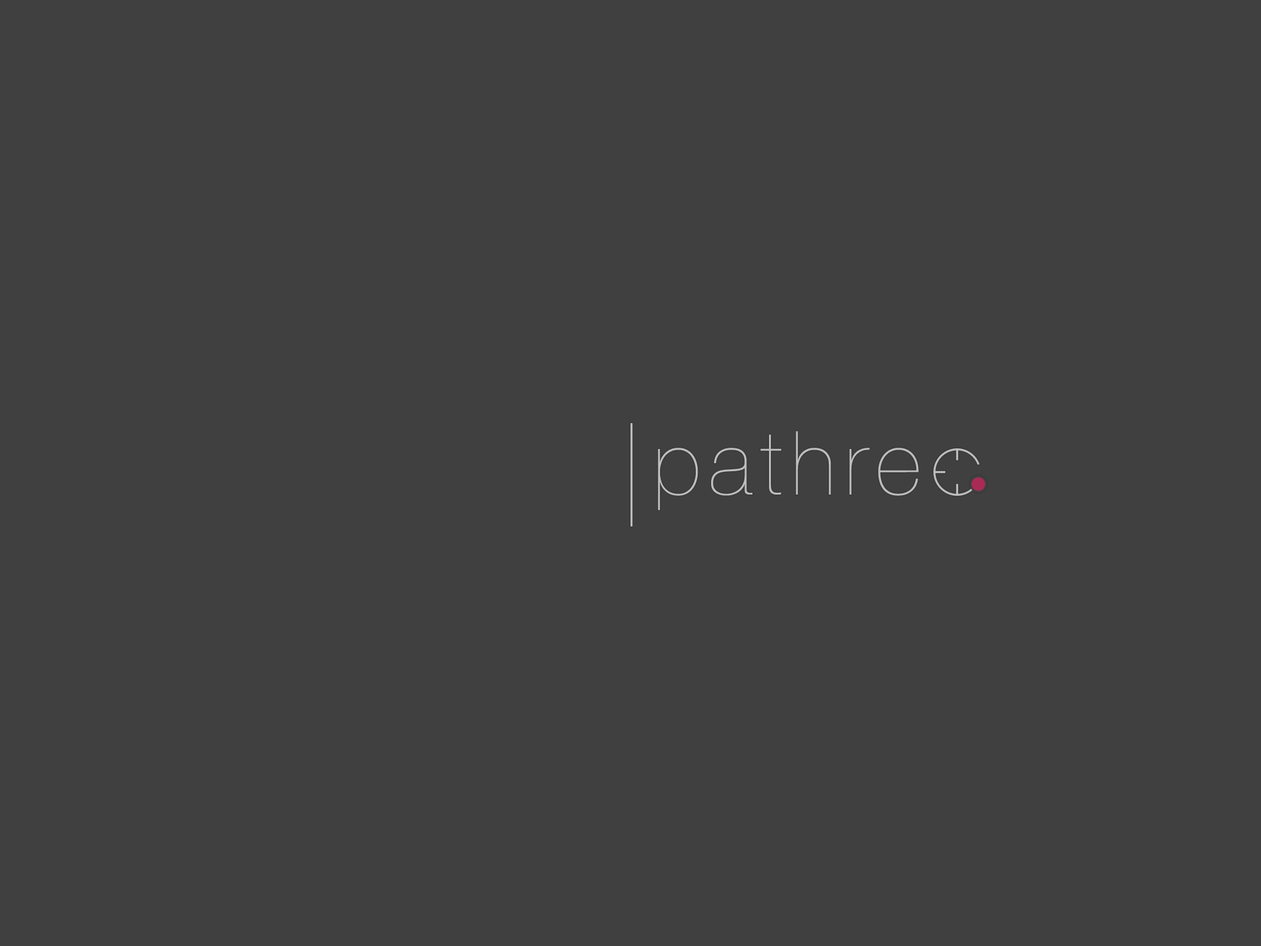
<style>
.page{position:relative;width:1261px;height:946px;background:#404040}
.page>*{position:absolute;margin:0}
.t1{font:88.7px "HelveticaNeue-UltraLight";letter-spacing:0.1em;color:#bebebe}
.t2{font:103.4px "HelveticaNeue-UltraLight";letter-spacing:0.1em;color:#bebebe}
</style>
<div class="page">
<p class="t1" style="left:630px;top:423px;width:289px;height:103px"><span class="t2">|</span>pathre</p>
</div>
